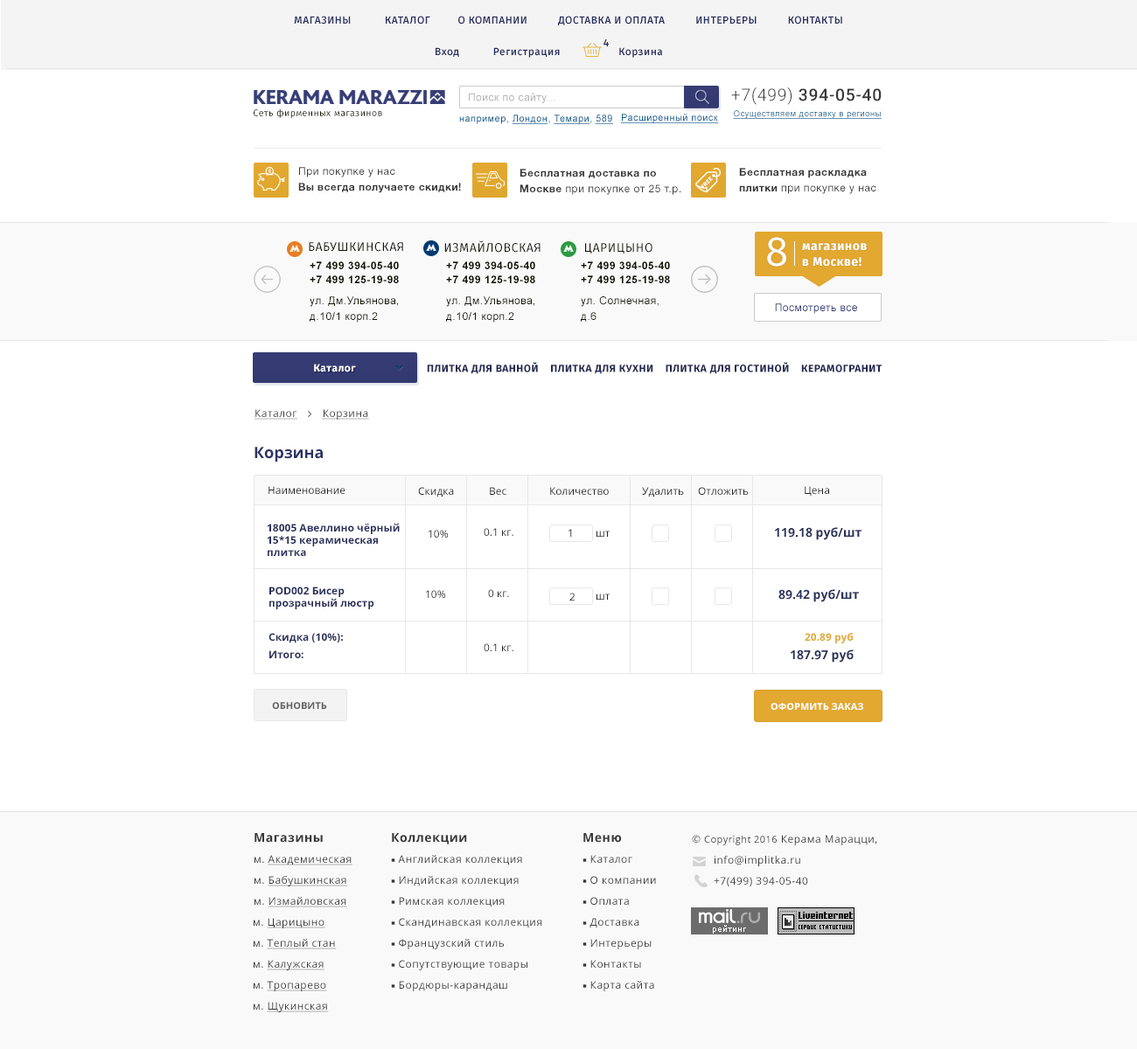
<style>
.page{position:relative;width:1137px;height:1049px;background:#ffffff}
.page>*{position:absolute;margin:0}
.t1{font:10.5px "FiraSans-Medium";letter-spacing:0.04em;color:#292f60;text-transform:uppercase}
.t2{font:10.5px "FiraSans-Medium";letter-spacing:0.04em;color:#292f60}
.t3{font:16.9px "Roboto-Medium";letter-spacing:0.04em;color:#383838;text-transform:uppercase}
.t4{font:16.9px "Roboto-Light";letter-spacing:0.04em;color:#383838;text-transform:uppercase}
.t5{font:10.4px "ArialMT";letter-spacing:0.04em;color:#b3b3b3}
.t6{font:9.1px "FiraSans-Book";letter-spacing:0.04em;color:#151408}
.t7{font:9.6px "ArialMT";letter-spacing:0.04em;color:#106394;text-decoration:underline}
.t8{font:8.4px "ArialMT";letter-spacing:0.04em;color:#106394;text-decoration:underline}
.t9{font:9.6px "ArialMT";letter-spacing:0.04em;color:#106394}
.t10{font:10.5px/15.7px "HelveticaNeueCyr-Bold";letter-spacing:0.04em;color:#383838}
.t11{font:10.5px/15.7px "HelveticaNeueCyr-Roman";letter-spacing:0.04em;color:#383838}
.t12{font:6.1px "FiraSans-Bold";letter-spacing:0.04em;color:#ffffff;text-transform:uppercase}
.t13{font:12.2px "FiraSans-Regular";letter-spacing:0.04em;color:#151408;text-transform:uppercase}
.t14{font:42px "FiraSans-Book";letter-spacing:0.04em;color:#ffffff}
.t15{font:12.2px/15.7px "FiraSans-Bold";letter-spacing:0.04em;color:#ffffff}
.t16{font:10.5px/9.4px "Arial-BoldMT";letter-spacing:0.04em;color:#151408;text-transform:uppercase}
.t17{font:10.5px/14px "Arial-BoldMT";letter-spacing:0.04em;color:#151408;text-transform:uppercase}
.t18{font:10.5px/21px "ArialMT";letter-spacing:0.04em;color:#151408}
.t19{font:10.5px/15.7px "ArialMT";letter-spacing:0.04em;color:#151408}
.t20{font:10.5px "ArialMT";letter-spacing:0.04em;color:#363d75}
.t21{font:10.5px "FiraSans-Bold";letter-spacing:0.04em;color:#ffffff}
.t22{font:10.5px "FiraSans-Bold";letter-spacing:0.04em;color:#222750;text-transform:uppercase}
.t23{font:10.5px "OpenSans";letter-spacing:0.04em;color:#383838;text-decoration:underline}
.t24{font:15.7px "OpenSans-Bold";color:#2d3363}
.t25{font:10.5px "OpenSans";color:#212121}
.t26{font:10.5px/12.2px "OpenSans-Bold";color:#2a305b}
.t27{font:10.5px "OpenSans"}
.t28{font:12.2px "OpenSans-Bold";color:#2a305b}
.t29{font:10.5px "OpenSans-Bold";color:#2a305b}
.t30{font:10.5px "OpenSans-Bold";color:#e2a830}
.t31{font:9.6px "OpenSans-Bold";color:#616161;text-transform:uppercase}
.t32{font:9.6px "OpenSans-Bold";color:#ffffff;text-transform:uppercase}
.t33{font:10.5px/21px "OpenSans";letter-spacing:0.04em;color:#383838;text-decoration:underline}
.t34{font:12.2px/21px "OpenSans-Bold";letter-spacing:0.04em;color:#383838}
.t35{font:10.5px/21px "OpenSans";letter-spacing:0.04em;color:#383838}
.t36{font:10.5px/21px "MinionPro-Regular";letter-spacing:0.04em;color:#383838}
.t37{font:10.5px "OpenSans";letter-spacing:0.04em;color:#383838}
.t38{font:9.6px "OpenSans";letter-spacing:0.04em;color:#383838}
.t39{font:10.5px/15.7px "OpenSans";letter-spacing:0.04em;color:#383838}
</style>
<div class="page">
<p class="t1" style="left:294px;top:16px;width:548px;height:9px">Магазины           Каталог         О компании          Доставка и оплата          Интерьеры          Контакты</p>
<p class="t2" style="left:603px;top:38px;width:6px;height:8px">4</p>
<p class="t2" style="left:435px;top:47px;width:24px;height:10px">Вход</p>
<p class="t2" style="left:493px;top:47px;width:67px;height:11px">Регистрация</p>
<p class="t2" style="left:619px;top:47px;width:44px;height:11px">Корзина</p>
<p class="t3" style="left:731px;top:87px;width:150px;height:18px"><span class="t4">+7(499) </span>394-05-40</p>
<p class="t5" style="left:469px;top:93px;width:86px;height:10px">Поиск по сайту...</p>
<p class="t6" style="left:254px;top:108px;width:128px;height:10px">Сеть фирменных магазинов</p>
<p class="t7" style="left:621px;top:114px;width:98px;height:9px">Расширенный поиск</p>
<p class="t8" style="left:733px;top:110px;width:148px;height:9px">Осуществляем доставку в регионы</p>
<p class="t9" style="left:459px;top:115px;width:154px;height:9px">например, <span class="t7">Лондон</span>, <span class="t7">Темари</span>, <span class="t7">589</span></p>
<p class="t10" style="left:298px;top:167px;width:163px;height:26px"><span class="t11">При покупке у нас <br></span>Вы всегда получаете скидки!</p>
<p class="t10" style="left:519px;top:169px;width:162px;height:26px">Бесплатная доставка по <br>Москве<span class="t11"> при покупке от 25 т.р.</span></p>
<p class="t10" style="left:739px;top:168px;width:137px;height:26px">Бесплатная раскладка <br>плитки<span class="t11"> при покупке у нас</span></p>
<p class="t12" style="left:700px;top:176px;width:13px;height:13px;rotate:-45deg">Free</p>
<p class="t13" style="left:309px;top:242px;width:94px;height:10px">БАБУШКИНСКАЯ</p>
<p class="t13" style="left:444px;top:240px;width:96px;height:13px">ИЗМАЙЛОВСКАЯ</p>
<p class="t13" style="left:585px;top:243px;width:67px;height:11px">царицыно</p>
<p class="t14" style="left:767px;top:237px;width:19px;height:30px">8</p>
<p class="t15" style="left:802px;top:243px;width:64px;height:24px">магазинов <br>в Москве!</p>
<p class="t16" style="left:309px;top:261px;width:90px;height:62px">+7 499 394-05-40 <br><span class="t17">+7 499 125-19-98<br></span><span class="t18">ул. Дм.Ульянова, <br></span><span class="t19">д.10/1 корп.2</span></p>
<p class="t16" style="left:446px;top:261px;width:89px;height:62px">+7 499 394-05-40 <br><span class="t17">+7 499 125-19-98<br></span><span class="t18">ул. Дм.Ульянова, <br></span><span class="t19">д.10/1 корп.2</span></p>
<p class="t16" style="left:581px;top:261px;width:89px;height:61px">+7 499 394-05-40 <br><span class="t17">+7 499 125-19-98<br></span><span class="t18">ул. Солнечная, <br></span><span class="t19">д.6</span></p>
<p class="t20" style="left:775px;top:303px;width:82px;height:11px">Посмотреть все</p>
<p class="t21" style="left:314px;top:364px;width:42px;height:8px">Каталог</p>
<p class="t22" style="left:427px;top:362px;width:455px;height:12px">Плитка для ванной    Плитка для кухни    Плитка для гостиной    Керамогранит</p>
<p class="t23" style="left:254px;top:409px;width:115px;height:11px">Каталог        Корзина</p>
<p class="t24" style="left:254px;top:447px;width:69px;height:15px">Корзина</p>
<p class="t25" style="left:268px;top:486px;width:77px;height:8px">Наименование</p>
<p class="t25" style="left:418px;top:487px;width:36px;height:10px">Скидка</p>
<p class="t25" style="left:490px;top:487px;width:16px;height:8px">Вес</p>
<p class="t25" style="left:550px;top:487px;width:59px;height:8px">Количество</p>
<p class="t25" style="left:642px;top:487px;width:42px;height:10px">Удалить</p>
<p class="t25" style="left:698px;top:487px;width:50px;height:8px">Отложить</p>
<p class="t25" style="left:804px;top:486px;width:25px;height:11px">Цена</p>
<p class="t26" style="left:267px;top:523px;width:133px;height:33px">18005 Авеллино чёрный <br>15*15 керамическая <br>плитка</p>
<p class="t25" style="left:428px;top:530px;width:21px;height:8px">10%</p>
<p class="t25" style="left:483px;top:528px;width:30px;height:8px">0.1 кг.</p>
<p class="t27" style="left:568px;top:529px;width:4px;height:8px">1</p>
<p class="t25" style="left:596px;top:531px;width:13px;height:6px">шт</p>
<p class="t28" style="left:775px;top:527px;width:86px;height:13px">119.18 руб/шт</p>
<p class="t26" style="left:269px;top:587px;width:105px;height:22px">POD002 Бисер <br>прозрачный люстр</p>
<p class="t25" style="left:426px;top:590px;width:20px;height:8px">10%</p>
<p class="t25" style="left:488px;top:589px;width:21px;height:8px">0 кг.</p>
<p class="t25" style="left:569px;top:593px;width:5px;height:8px">2</p>
<p class="t25" style="left:596px;top:594px;width:13px;height:6px">шт</p>
<p class="t28" style="left:778px;top:589px;width:81px;height:13px">89.42 руб/шт</p>
<p class="t29" style="left:268px;top:633px;width:75px;height:10px">Скидка (10%):</p>
<p class="t30" style="left:804px;top:633px;width:49px;height:10px">20.89 руб</p>
<p class="t29" style="left:269px;top:650px;width:34px;height:8px">Итого:</p>
<p class="t25" style="left:483px;top:643px;width:30px;height:8px">0.1 кг.</p>
<p class="t28" style="left:790px;top:650px;width:63px;height:13px">187.97 руб</p>
<p class="t31" style="left:272px;top:702px;width:55px;height:7px">Обновить</p>
<p class="t32" style="left:770px;top:703px;width:93px;height:7px">оформить заказ</p>
<p class="t33" style="left:254px;top:833px;width:98px;height:75px"><span class="t34">Магазины<br></span><span class="t35">м. </span>Академическая<br><span class="t35">м. </span>Бабушкинская<br><span class="t35">м. </span>Измайловская</p>
<p class="t35" style="left:391px;top:833px;width:151px;height:158px"><span class="t34">Коллекции<br></span><span class="t36">■ </span>Английская коллекция<br><span class="t36">■ </span>Индийская коллекция<br><span class="t36">■ </span>Римская коллекция<br><span class="t36">■ </span>Скандинавская коллекция<br><span class="t36">■ </span>Французский стиль<br><span class="t36">■ </span>Сопутствующие товары<br><span class="t36">■ </span>Бордюры-карандаш</p>
<p class="t35" style="left:582px;top:833px;width:74px;height:158px"><span class="t34">Меню<br></span><span class="t36">■ </span>Каталог<br><span class="t36">■ </span>О компании<br><span class="t36">■ </span>Оплата<br><span class="t36">■ </span>Доставка<br><span class="t36">■ </span>Интерьеры<br><span class="t36">■ </span>Контакты<br><span class="t36">■ </span>Карта сайта</p>
<p class="t37" style="left:692px;top:835px;width:185px;height:10px">© <span class="t38">Copyright 2016</span> Керама Марацци,</p>
<p class="t35" style="left:713px;top:856px;width:95px;height:31px">info@implitka.ru<br>+7(499) 394-05-40</p>
<p class="t33" style="left:254px;top:918px;width:83px;height:94px"><span class="t39"><br></span><span class="t35">м. </span>Царицыно<br><span class="t35">м. </span>Теплый стан<br><span class="t35">м. </span>Калужская<br><span class="t35">м. </span>Тропарево<br><span class="t35">м. </span>Щукинская</p>
</div>
